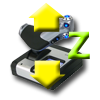
<style>
.page{position:relative;width:100px;height:100px;background:#ffffff}
.page>*{position:absolute;margin:0}
.t1{font:37.5px "Tahoma-Bold"}
</style>
<div class="page">
<p class="t1" style="left:68px;top:31px;width:22px;height:28px">Z</p>
</div>
